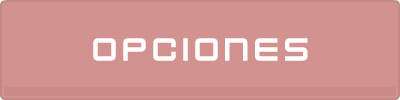
<style>
.page{position:relative;width:400px;height:100px;background:#d19290}
.page>*{position:absolute;margin:0}
.t1{font:36px "KenVector-Future";color:#ffffff}
</style>
<div class="page">
<p class="t1" style="left:93px;top:38px;width:215px;height:23px">opciones</p>
</div>
